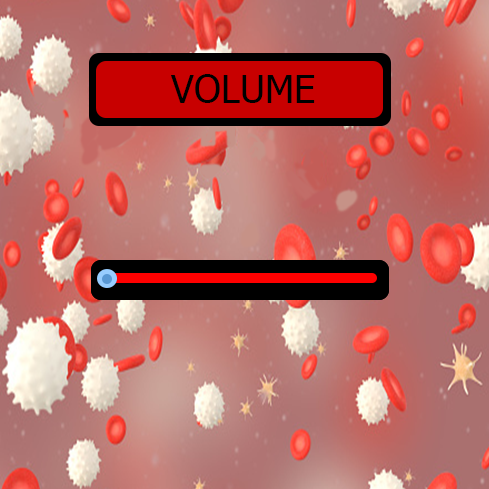
<style>
.page{position:relative;width:489px;height:489px}
.page>*{position:absolute;margin:0}
.t1{font:38px "Tahoma";color:#000000}
</style>
<div class="page">
<p class="t1" style="left:171px;top:74px;width:144px;height:29px">VOLUME</p>
</div>
